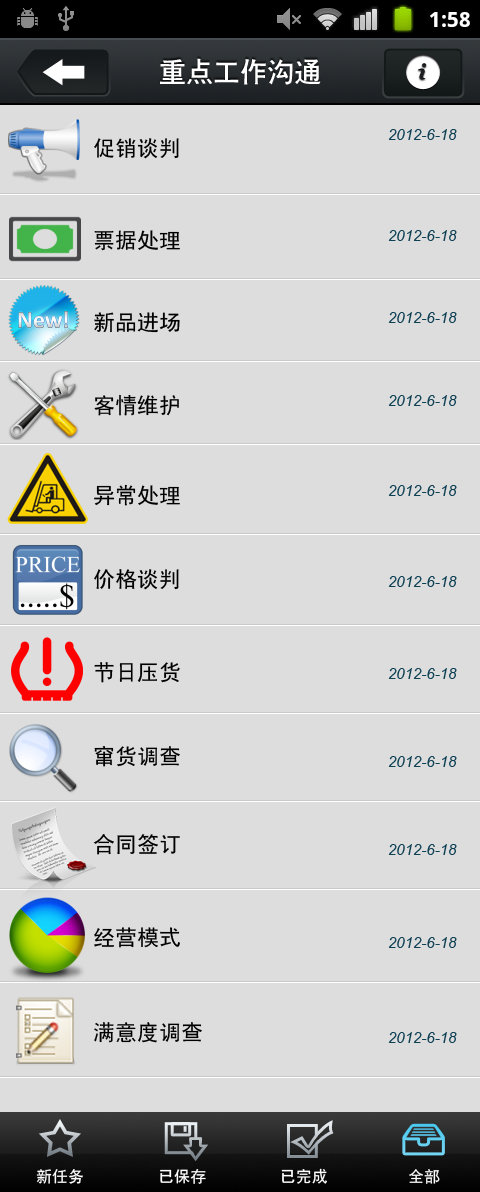
<style>
.page{position:relative;width:480px;height:1192px;background:#dddddd}
.page>*{position:absolute;margin:0}
.t1{font:27px "CTCuHeiSJ";color:#ffffff}
.t2{font:15px "Arial-ItalicMT";color:#0e4054}
.t3{font:22px "SimHei";color:#000000}
.t4{font:16px "SimHei";color:#ffffff}
</style>
<div class="page">
<p class="t1" style="left:160px;top:58px;width:161px;height:27px">重点工作沟通</p>
<p class="t2" style="left:388px;top:129px;width:69px;height:11px">2012-6-18</p>
<p class="t3" style="left:94px;top:138px;width:85px;height:21px">促销谈判</p>
<p class="t3" style="left:94px;top:230px;width:86px;height:21px">票据处理</p>
<p class="t2" style="left:388px;top:230px;width:69px;height:11px">2012-6-18</p>
<p class="t3" style="left:94px;top:312px;width:86px;height:21px">新品进场</p>
<p class="t2" style="left:388px;top:312px;width:69px;height:11px">2012-6-18</p>
<p class="t3" style="left:94px;top:394px;width:85px;height:22px">客情维护</p>
<p class="t2" style="left:388px;top:395px;width:69px;height:11px">2012-6-18</p>
<p class="t3" style="left:94px;top:484px;width:86px;height:22px">异常处理</p>
<p class="t2" style="left:388px;top:485px;width:69px;height:11px">2012-6-18</p>
<p class="t3" style="left:94px;top:569px;width:85px;height:21px">价格谈判</p>
<p class="t2" style="left:388px;top:576px;width:69px;height:11px">2012-6-18</p>
<p class="t3" style="left:94px;top:662px;width:86px;height:21px">节日压货</p>
<p class="t2" style="left:388px;top:668px;width:69px;height:11px">2012-6-18</p>
<p class="t3" style="left:94px;top:746px;width:86px;height:21px">窜货调查</p>
<p class="t2" style="left:388px;top:756px;width:69px;height:11px">2012-6-18</p>
<p class="t3" style="left:93px;top:834px;width:87px;height:21px">合同签订</p>
<p class="t2" style="left:388px;top:844px;width:69px;height:11px">2012-6-18</p>
<p class="t3" style="left:94px;top:927px;width:86px;height:21px">经营模式</p>
<p class="t2" style="left:388px;top:937px;width:69px;height:11px">2012-6-18</p>
<p class="t3" style="left:94px;top:1022px;width:108px;height:21px">满意度调查</p>
<p class="t2" style="left:388px;top:1032px;width:69px;height:11px">2012-6-18</p>
<p class="t4" style="left:36px;top:1169px;width:47px;height:15px">新任务</p>
<p class="t4" style="left:160px;top:1169px;width:46px;height:15px">已保存</p>
<p class="t4" style="left:281px;top:1168px;width:46px;height:16px">已完成</p>
<p class="t4" style="left:409px;top:1169px;width:31px;height:15px">全部</p>
</div>
